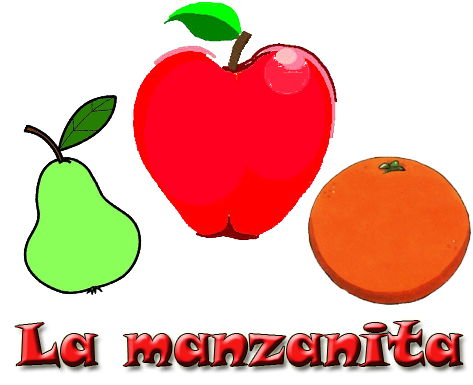
<style>
.page{position:relative;width:473px;height:385px;background:#ffffff}
.page>*{position:absolute;margin:0}
.t1{font:60px "SnapITC-Regular"}
</style>
<div class="page">
<p class="t1" style="left:15px;top:321px;width:448px;height:47px">La manzanita</p>
</div>
